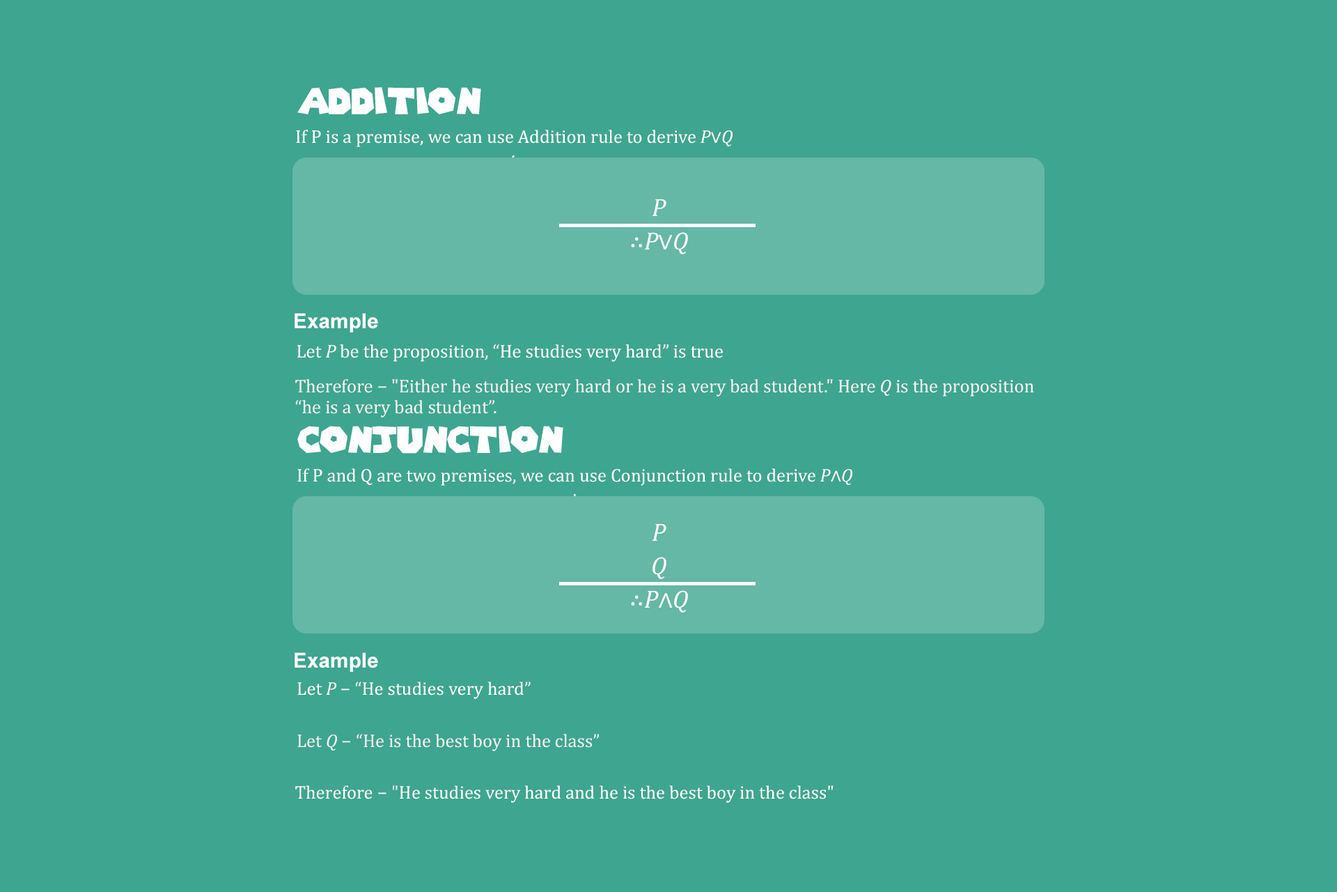
<style>
.page{position:relative;width:1337px;height:892px;background:#3ea590}
.page>*{position:absolute;margin:0}
.t1{font:35.9px "SuperMarioGalaxy";color:#ffffff}
.t2{font:18.5px/14.5px "Cambria";color:#ffffff}
.t3{font:18.5px/14.5px "Cambria-Italic";color:#ffffff}
.t4{font:25.1px/33.4px "Cambria-Italic";color:#ffffff}
.t5{font:25.1px/33.4px "Cambria";color:#ffffff}
.t6{font:20.8px "Arial-BoldMT";color:#ffffff}
.t7{font:18.6px "Cambria";color:#ffffff}
.t8{font:18.6px "Cambria-Italic";color:#ffffff}
.t9{font:18.6px/20.9px "Cambria";color:#f5f5f5}
.t10{font:18.6px/20.9px "Cambria-Italic";color:#f5f5f5}
.t11{font:18.5px/14.6px "Cambria";color:#ffffff}
.t12{font:18.5px/14.6px "Cambria-Italic";color:#ffffff}
.t13{font:18.5px "Cambria";color:#ffffff}
.t14{font:18.5px "Cambria-Italic";color:#ffffff}
.t15{font:18.5px "Cambria";color:#f5f5f5}
.t16{font:18.5px "Cambria-Italic";color:#f5f5f5}
</style>
<div class="page">
<p class="t1" style="left:297px;top:87px;width:184px;height:27px">ADDITION</p>
<p class="t2" style="left:296px;top:130px;width:437px;height:27px;text-align:center">If P is a premise, we can use Addition rule to derive <span class="t3">P</span>∨<span class="t3">Q<br>.</span></p>
<p class="t4" style="left:631px;top:199px;width:57px;height:55px;text-align:center">P<br><span class="t5">∴</span>P<span class="t5">∨</span>Q</p>
<p class="t6" style="left:295px;top:313px;width:83px;height:19px">Example</p>
<p class="t7" style="left:297px;top:344px;width:426px;height:18px">Let <span class="t8">P </span>be the proposition, “He studies very hard” is true</p>
<p class="t9" style="left:295px;top:379px;width:739px;height:38px">Therefore − "Either he studies very hard or he is a very bad student." Here <span class="t10">Q</span> is the proposition <br>“he is a very bad student”.</p>
<p class="t1" style="left:297px;top:426px;width:267px;height:27px">Conjunction</p>
<p class="t11" style="left:297px;top:468px;width:556px;height:28px;text-align:center">If P and Q are two premises, we can use Conjunction rule to derive <span class="t12">P</span>∧<span class="t12">Q<br></span>.</p>
<p class="t4" style="left:631px;top:524px;width:57px;height:88px;text-align:center">P<br>Q<br><span class="t5">∴</span>P<span class="t5">∧</span>Q</p>
<p class="t6" style="left:295px;top:652px;width:83px;height:19px">Example</p>
<p class="t13" style="left:297px;top:681px;width:234px;height:18px">Let <span class="t14">P</span> − “He studies very hard”</p>
<p class="t15" style="left:297px;top:733px;width:302px;height:18px">Let <span class="t16">Q</span> − “He is the best boy in the class”</p>
<p class="t13" style="left:295px;top:785px;width:539px;height:17px">Therefore − "He studies very hard and he is the best boy in the class"</p>
</div>
